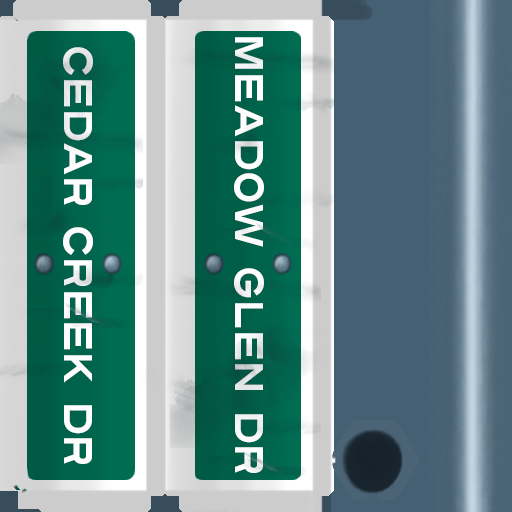
<style>
.page{position:relative;width:512px;height:512px}
.page>*{position:absolute;margin:0}
.t1{font:40px "Turnpike";color:#fefeff;scale:0.75 1}
</style>
<div class="page">
<p class="t1" style="left:234px;top:37px;width:30px;height:436px;rotate:90deg">Meadow Glen Dr</p>
<p class="t1" style="left:63px;top:47px;width:30px;height:417px;rotate:90deg">Cedar Creek Dr</p>
</div>
